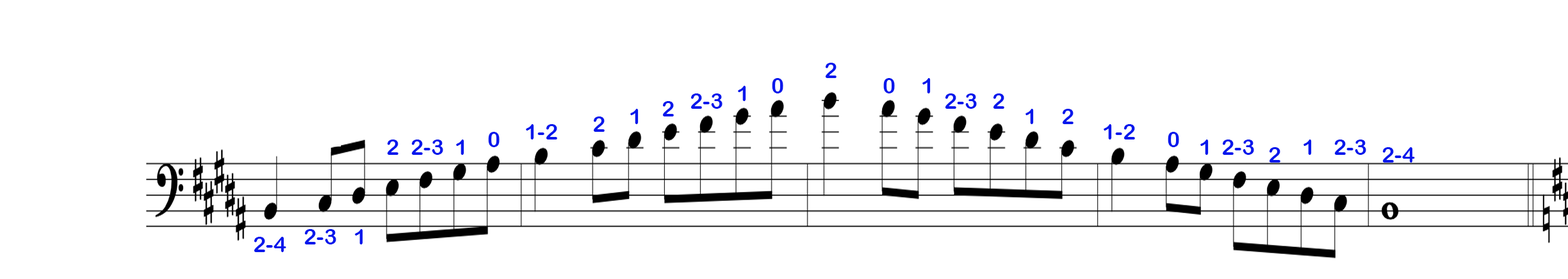
<style>
.page{position:relative;width:1568px;height:279px;background:#ffffff}
.page>*{position:absolute;margin:0}
.t1{font:21.8px "ArialRoundedMTBold";color:#0417ec}
</style>
<div class="page">
<p class="t1" style="left:825px;top:63px;width:12px;height:15px">2</p>
<p class="t1" style="left:738px;top:86px;width:8px;height:15px">1</p>
<p class="t1" style="left:772px;top:78px;width:11px;height:16px">0</p>
<p class="t1" style="left:883px;top:78px;width:12px;height:16px">0</p>
<p class="t1" style="left:922px;top:78px;width:9px;height:16px">1</p>
<p class="t1" style="left:662px;top:101px;width:12px;height:16px">2</p>
<p class="t1" style="left:690px;top:94px;width:33px;height:15px">2-3</p>
<p class="t1" style="left:945px;top:94px;width:32px;height:15px">2-3</p>
<p class="t1" style="left:993px;top:94px;width:11px;height:15px">2</p>
<p class="t1" style="left:630px;top:109px;width:9px;height:15px">1</p>
<p class="t1" style="left:1025px;top:109px;width:9px;height:15px">1</p>
<p class="t1" style="left:1062px;top:109px;width:12px;height:15px">2</p>
<p class="t1" style="left:526px;top:124px;width:31px;height:16px">1-2</p>
<p class="t1" style="left:593px;top:117px;width:12px;height:15px">2</p>
<p class="t1" style="left:1104px;top:124px;width:31px;height:16px">1-2</p>
<p class="t1" style="left:488px;top:132px;width:12px;height:15px">0</p>
<p class="t1" style="left:1168px;top:132px;width:11px;height:15px">0</p>
<p class="t1" style="left:387px;top:140px;width:11px;height:15px">2</p>
<p class="t1" style="left:411px;top:140px;width:32px;height:15px">2-3</p>
<p class="t1" style="left:456px;top:140px;width:8px;height:15px">1</p>
<p class="t1" style="left:1200px;top:140px;width:9px;height:15px">1</p>
<p class="t1" style="left:1222px;top:140px;width:32px;height:15px">2-3</p>
<p class="t1" style="left:1269px;top:147px;width:11px;height:16px">2</p>
<p class="t1" style="left:1303px;top:140px;width:9px;height:15px">1</p>
<p class="t1" style="left:1334px;top:140px;width:32px;height:15px">2-3</p>
<p class="t1" style="left:1382px;top:147px;width:33px;height:16px">2-4</p>
<p class="t1" style="left:304px;top:229px;width:32px;height:16px">2-3</p>
<p class="t1" style="left:355px;top:229px;width:8px;height:16px">1</p>
<p class="t1" style="left:254px;top:237px;width:32px;height:15px">2-4</p>
</div>
